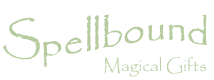
<style>
.page{position:relative;width:214px;height:80px;background:#ffffff}
.page>*{position:absolute;margin:0}
.t1{font:40px "Papyrus-Regular";color:#b6cb9e}
.t2{font:17.1px "Papyrus-Regular";color:#b6cb9e}
</style>
<div class="page">
<p class="t1" style="left:3px;top:14px;width:204px;height:53px">Spellbound</p>
<p class="t2" style="left:104px;top:56px;width:102px;height:21px">Magical Gifts</p>
</div>
